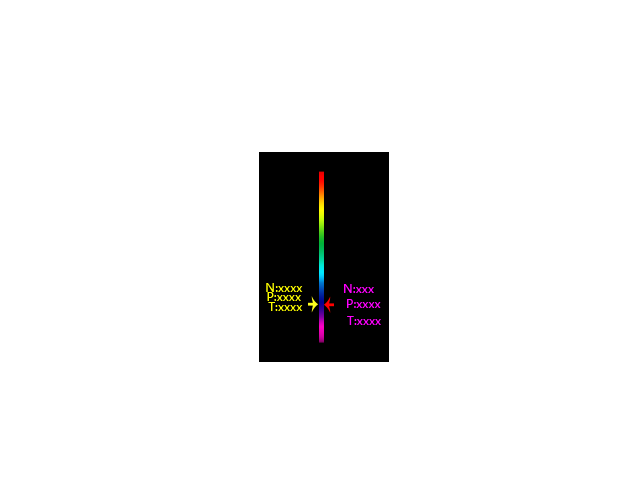
<style>
.page{position:relative;width:640px;height:480px;background:#ffffff}
.page>*{position:absolute;margin:0}
.t1{font:12px "MicrosoftYaHei";color:#ffff00}
.t2{font:12px "MicrosoftYaHei";color:#ff00ff}
</style>
<div class="page">
<p class="t1" style="left:266px;top:283px;width:37px;height:9px">N:xxxx</p>
<p class="t1" style="left:267px;top:292px;width:34px;height:9px">P:xxxx</p>
<p class="t2" style="left:344px;top:284px;width:30px;height:9px">N:xxx</p>
<p class="t1" style="left:268px;top:302px;width:35px;height:9px">T:xxxx</p>
<p class="t2" style="left:347px;top:299px;width:34px;height:9px">P:xxxx</p>
<p class="t2" style="left:347px;top:316px;width:34px;height:9px">T:xxxx</p>
</div>
